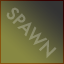
<style>
.page{position:relative;width:64px;height:64px}
.page>*{position:absolute;margin:0}
.t1{font:17px "Futura-Medium";color:#8c8d6e}
</style>
<div class="page">
<p class="t1" style="left:6px;top:7px;width:51px;height:52px;rotate:45deg">SPAWN</p>
</div>
